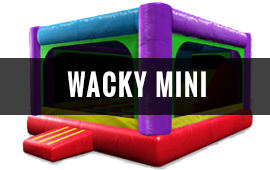
<style>
.page{position:relative;width:270px;height:170px;background:#ffffff}
.page>*{position:absolute;margin:0}
.t1{font:29.2px "Oswald-Bold";letter-spacing:0.075em;color:#ffffff;scale:0.86 1}
</style>
<div class="page">
<p class="t1" style="left:67px;top:71px;width:139px;height:26px">WACKY MINI</p>
</div>
